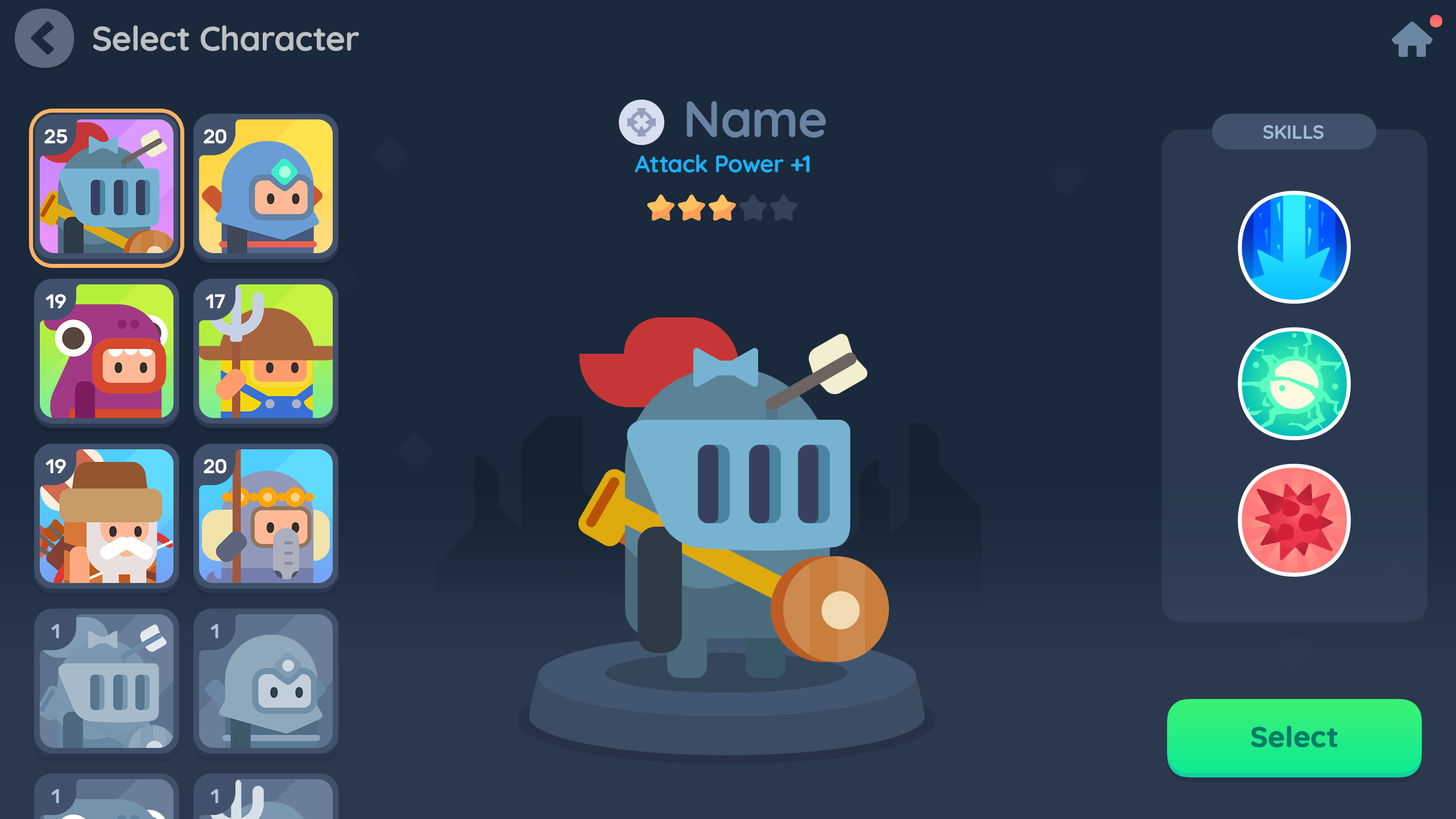
<style>
.page{position:relative;width:1456px;height:819px;background:#1a293c}
.page>*{position:absolute;margin:0}
.t1{font:34.1px "Quicksand-Bold";letter-spacing:-0.01em;color:#bdc1c4}
.t2{font:51.2px "Quicksand-Bold";letter-spacing:-0.01em;color:#6b83a2}
.t3{font:19.3px "Quicksand-Bold";letter-spacing:-0.01em;color:#a0bdd8;text-transform:uppercase}
.t4{font:19.9px "Rubik-Medium";letter-spacing:-0.01em;color:#ffffff}
.t5{font:23.9px "Quicksand-Bold";letter-spacing:-0.01em;color:#1cb0f6}
.t6{font:19.9px "Rubik-Medium";letter-spacing:-0.01em;color:#acc0dc}
.t7{font:28.4px "Quicksand-Bold";color:#007c69;font-weight:bold}
</style>
<div class="page">
<p class="t1" style="left:93px;top:25px;width:266px;height:26px">Select Character</p>
<p class="t2" style="left:686px;top:101px;width:140px;height:37px">Name</p>
<p class="t3" style="left:1263px;top:125px;width:60px;height:14px">Skills</p>
<p class="t4" style="left:44px;top:129px;width:23px;height:15px">25</p>
<p class="t4" style="left:204px;top:129px;width:22px;height:15px">20</p>
<p class="t5" style="left:635px;top:154px;width:175px;height:19px">Attack Power +1</p>
<p class="t4" style="left:45px;top:294px;width:21px;height:14px">19</p>
<p class="t4" style="left:205px;top:294px;width:20px;height:14px">17</p>
<p class="t4" style="left:45px;top:459px;width:21px;height:14px">19</p>
<p class="t4" style="left:204px;top:459px;width:22px;height:15px">20</p>
<p class="t6" style="left:51px;top:624px;width:8px;height:14px">1</p>
<p class="t6" style="left:210px;top:624px;width:8px;height:14px">1</p>
<p class="t7" style="left:1251px;top:726px;width:87px;height:21px">Select</p>
<p class="t6" style="left:51px;top:789px;width:8px;height:14px">1</p>
<p class="t6" style="left:210px;top:789px;width:8px;height:14px">1</p>
</div>
